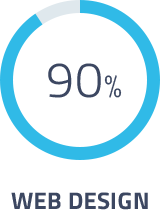
<style>
.page{position:relative;width:160px;height:210px;background:#ffffff}
.page>*{position:absolute;margin:0}
.t1{font:50px "TitilliumWeb-Light";letter-spacing:0.02em;color:#3c4761;text-transform:uppercase}
.t2{font:32px "TitilliumWeb-Light";letter-spacing:0.02em;color:#3c4761;text-transform:uppercase}
.t3{font:24px "TitilliumWeb-Bold";letter-spacing:0.02em;color:#3c4761;text-transform:uppercase}
</style>
<div class="page">
<p class="t1" style="left:48px;top:63px;width:74px;height:35px">90<span class="t2">%</span></p>
<p class="t3" style="left:11px;top:192px;width:137px;height:18px">Web Design</p>
</div>
